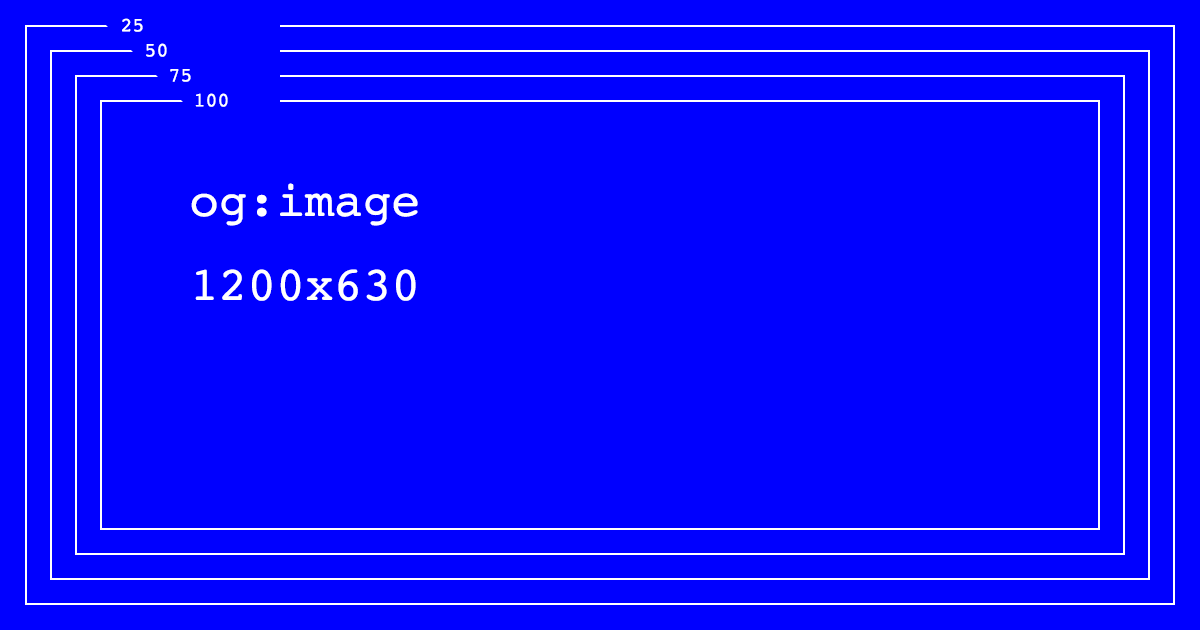
<style>
.page{position:relative;width:1200px;height:630px;background:#0000ff}
.page>*{position:absolute;margin:0}
.t1{font:20px "Courier";color:#ffffff}
.t2{font:48px "Courier";color:#ffffff}
</style>
<div class="page">
<p class="t1" style="left:122px;top:18px;width:21px;height:14px">25</p>
<p class="t1" style="left:146px;top:43px;width:21px;height:14px">50</p>
<p class="t1" style="left:170px;top:69px;width:21px;height:13px">75</p>
<p class="t1" style="left:195px;top:93px;width:33px;height:14px">100</p>
<p class="t2" style="left:191px;top:183px;width:227px;height:118px;text-align:center">og:image<br>1200x630</p>
</div>
